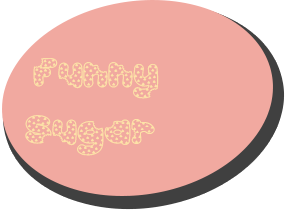
<style>
.page{position:relative;width:287px;height:212px;background:#f1a9a0}
.page>*{position:absolute;margin:0}
.t1{font:48px "AccentCookieDough";color:#fde3a7}
</style>
<div class="page">
<p class="t1" style="left:25px;top:58px;width:134px;height:98px">Funny Sugar</p>
</div>
